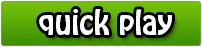
<style>
.page{position:relative;width:202px;height:47px}
.page>*{position:absolute;margin:0}
.t1{font:30px "HoboStd";color:#ffffff}
</style>
<div class="page">
<p class="t1" style="left:39px;top:9px;width:133px;height:26px">quick play</p>
</div>
